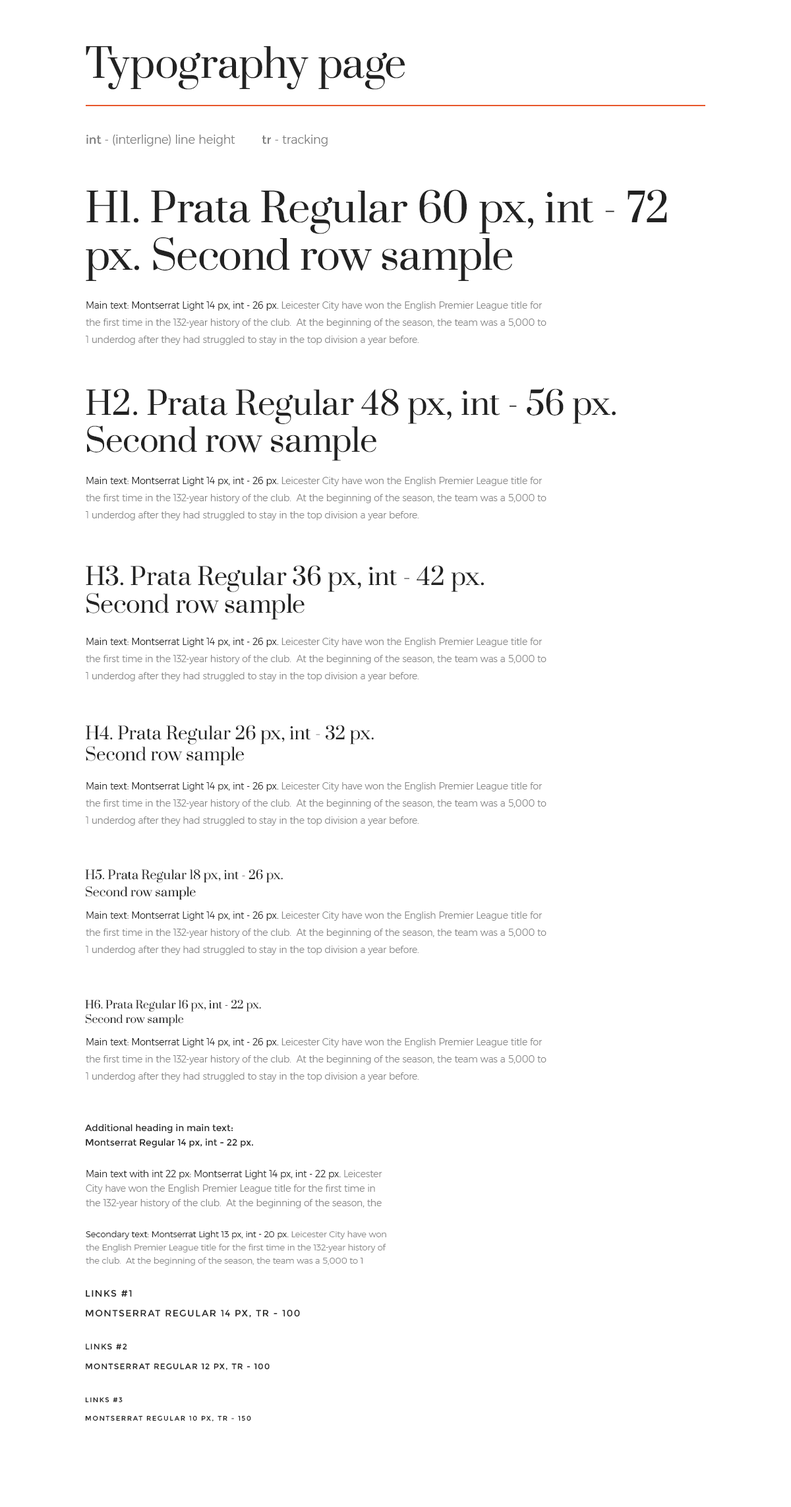
<style>
.page{position:relative;width:791px;height:1507px;background:#ffffff}
.page>*{position:absolute;margin:0}
.t1{font:39.6px "Prata-Regular";color:#222222}
.t2{font:11.9px "Montserrat-Light";color:#7e7e7e}
.t3{font:11.9px "Montserrat-Regular";color:#7e7e7e}
.t4{font:39.6px/47.5px "Prata-Regular";color:#222222}
.t5{font:9.2px/17.1px "Montserrat-Light";color:#888888}
.t6{font:9.2px/17.1px "Montserrat-Light";color:#222222}
.t7{font:31.7px/36.9px "Prata-Regular";color:#222222}
.t8{font:23.7px/27.7px "Prata-Regular";color:#222222}
.t9{font:17.1px/21.1px "Prata-Regular";color:#222222}
.t10{font:11.9px/17.1px "Prata-Regular";color:#222222}
.t11{font:10.6px/14.5px "Prata-Regular";color:#222222}
.t12{font:9.2px/14.5px "Montserrat-Regular";color:#222222}
.t13{font:9.2px/14.5px "Montserrat-Light";color:#888888}
.t14{font:9.2px/14.5px "Montserrat-Light";color:#222222}
.t15{font:8.6px/13.2px "Montserrat-Light";color:#888888}
.t16{font:8.6px/13.2px "Montserrat-Light";color:#222222}
.t17{font:9.2px "Montserrat-Regular";letter-spacing:0.1em;color:#222222;text-transform:uppercase}
.t18{font:7.9px "Montserrat-Regular";letter-spacing:0.1em;color:#222222;text-transform:uppercase}
.t19{font:6.6px "Montserrat-Regular";letter-spacing:0.15em;color:#222222;text-transform:uppercase}
</style>
<div class="page">
<p class="t1" style="left:86px;top:46px;width:320px;height:44px">Typography page</p>
<p class="t2" style="left:86px;top:135px;width:149px;height:11px"><span class="t3">int</span> - (interligne) line height</p>
<p class="t2" style="left:262px;top:135px;width:66px;height:11px"><span class="t3">tr</span> - tracking</p>
<p class="t4" style="left:86px;top:189px;width:581px;height:92px">H1. Prata Regular 60 px, int - 72 px. Second row sample</p>
<p class="t5" style="left:86px;top:301px;width:461px;height:44px"><span class="t6">Main text: Montserrat Light 14 px, int - 26 px. </span>Leicester City have won the English Premier League title for the first time in the 132-year history of the club.  At the beginning of the season, the team was a 5,000 to 1 underdog after they had struggled to stay in the top division a year before.</p>
<p class="t7" style="left:86px;top:388px;width:530px;height:73px">H2. Prata Regular 48 px, int - 56 px. Second row sample</p>
<p class="t5" style="left:86px;top:477px;width:461px;height:43px"><span class="t6">Main text: Montserrat Light 14 px, int - 26 px. </span>Leicester City have won the English Premier League title for the first time in the 132-year history of the club.  At the beginning of the season, the team was a 5,000 to 1 underdog after they had struggled to stay in the top division a year before.</p>
<p class="t8" style="left:86px;top:565px;width:398px;height:55px">H3. Prata Regular 36 px, int - 42 px. <br>Second row sample</p>
<p class="t5" style="left:86px;top:638px;width:461px;height:43px"><span class="t6">Main text: Montserrat Light 14 px, int - 26 px. </span>Leicester City have won the English Premier League title for the first time in the 132-year history of the club.  At the beginning of the season, the team was a 5,000 to 1 underdog after they had struggled to stay in the top division a year before.</p>
<p class="t9" style="left:86px;top:725px;width:288px;height:41px">H4. Prata Regular 26 px, int - 32 px. <br>Second row sample</p>
<p class="t5" style="left:86px;top:782px;width:461px;height:44px"><span class="t6">Main text: Montserrat Light 14 px, int - 26 px. </span>Leicester City have won the English Premier League title for the first time in the 132-year history of the club.  At the beginning of the season, the team was a 5,000 to 1 underdog after they had struggled to stay in the top division a year before.</p>
<p class="t10" style="left:85px;top:868px;width:198px;height:32px">H5. Prata Regular 18 px, int - 26 px. <br>Second row sample</p>
<p class="t5" style="left:86px;top:911px;width:461px;height:44px"><span class="t6">Main text: Montserrat Light 14 px, int - 26 px. </span>Leicester City have won the English Premier League title for the first time in the 132-year history of the club.  At the beginning of the season, the team was a 5,000 to 1 underdog after they had struggled to stay in the top division a year before.</p>
<p class="t11" style="left:85px;top:999px;width:176px;height:27px">H6. Prata Regular 16 px, int - 22 px. <br>Second row sample</p>
<p class="t5" style="left:86px;top:1038px;width:461px;height:44px"><span class="t6">Main text: Montserrat Light 14 px, int - 26 px. </span>Leicester City have won the English Premier League title for the first time in the 132-year history of the club.  At the beginning of the season, the team was a 5,000 to 1 underdog after they had struggled to stay in the top division a year before.</p>
<p class="t12" style="left:85px;top:1124px;width:168px;height:24px">Additional heading in main text:<br>Montserrat Regular 14 px, int - 22 px.</p>
<p class="t13" style="left:86px;top:1170px;width:296px;height:38px"><span class="t14">Main text with int 22 px: Montserrat Light 14 px, int - 22 px. </span>Leicester City have won the English Premier League title for the first time in the 132-year history of the club.  At the beginning of the season, the team was a 5,000 to 1 underdog after they had struggled to stay in the top division a year before.</p>
<p class="t15" style="left:86px;top:1231px;width:300px;height:34px"><span class="t16">Secondary text: Montserrat Light 13 px, int - 20 px. </span>Leicester City have won the English Premier League title for the first time in the 132-year history of the club.  At the beginning of the season, the team was a 5,000 to 1 underdog after they had struggled to stay in the top division a year before.</p>
<p class="t17" style="left:86px;top:1289px;width:46px;height:8px">Links #1</p>
<p class="t17" style="left:86px;top:1309px;width:214px;height:9px">montserrat regular 14 px, tr - 100</p>
<p class="t18" style="left:86px;top:1343px;width:41px;height:7px">Links #2</p>
<p class="t18" style="left:86px;top:1363px;width:184px;height:7px">montserrat regular 12 px, tr - 100</p>
<p class="t19" style="left:85px;top:1397px;width:38px;height:6px">Links #3</p>
<p class="t19" style="left:85px;top:1415px;width:166px;height:7px">montserrat regular 10 px, tr - 150</p>
</div>
